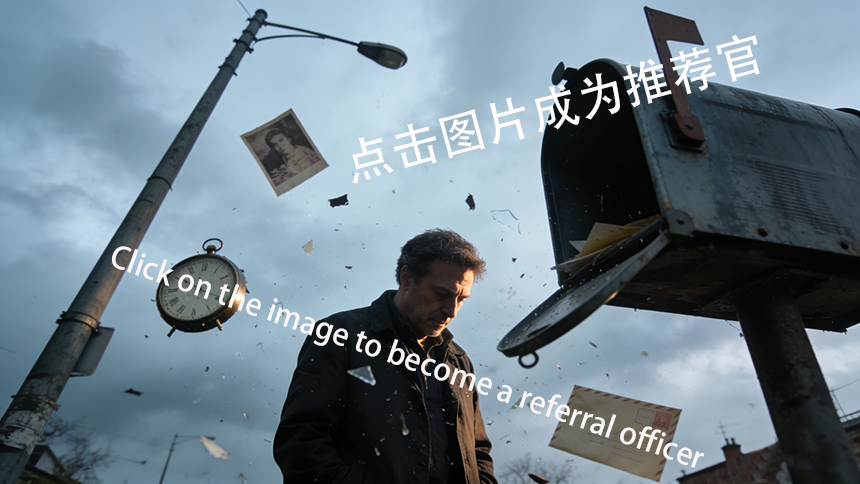
<style>
.page{position:relative;width:860px;height:484px}
.page>*{position:absolute;margin:0}
.t1{font:48px "AdobeHeitiStd-Regular";color:#fffcfc}
.t2{font:30px "AdobeHeitiStd-Regular";color:#faf6f6}
</style>
<div class="page">
<p class="t1" style="left:352px;top:35px;width:408px;height:149px;rotate:-15deg">点击图片成为推荐官</p>
<p class="t2" style="left:112px;top:246px;width:593px;height:222px;rotate:19deg">Click on the image to become a referral officer</p>
</div>
